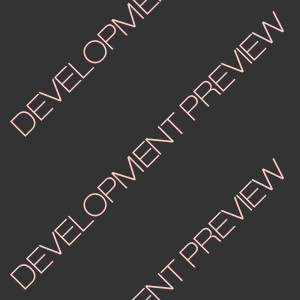
<style>
.page{position:relative;width:300px;height:300px;background:#333333}
.page>*{position:absolute;margin:0}
.t1{font:30px "HelveticaNeueLTPro-ThEx";color:#ffc9c9}
</style>
<div class="page">
<p class="t1" style="left:10px;top:11px;width:274px;height:279px;rotate:-45deg">DEVELOPMENT PREVIEW</p>
</div>
